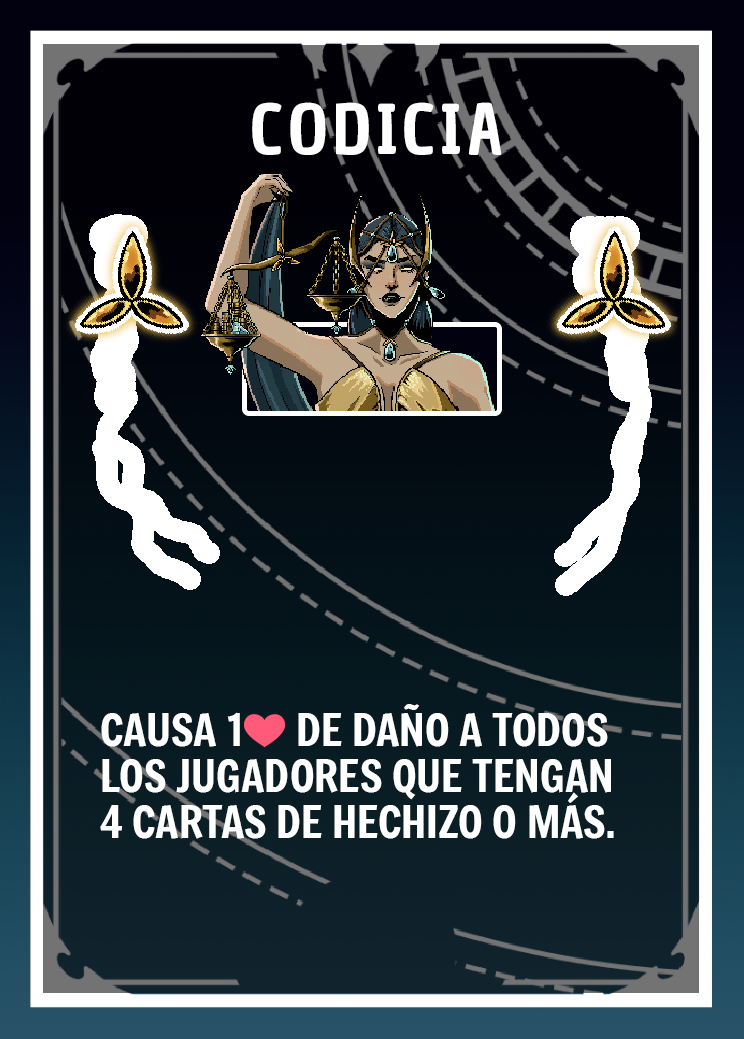
<style>
.page{position:relative;width:744px;height:1039px}
.page>*{position:absolute;margin:0}
.t1{font:66.7px "ChauPhilomeneOne-Regular";letter-spacing:0.075em;color:#ffffff}
.t2{font:43.7px/45.8px "Freeman-Regular";color:#ffffff}
.t3{font:43.7px/45.8px "EmojiOneColor";color:#ffffff}
</style>
<div class="page">
<p class="t1" style="left:252px;top:102px;width:250px;height:53px">CODICIA</p>
<p class="t2" style="left:100px;top:704px;width:514px;height:135px">CAUSA 1<span class="t3">❤️</span> DE DAÑO A TODOS LOS JUGADORES QUE TENGAN     4 CARTAS DE HECHIZO O MÁS.</p>
</div>
